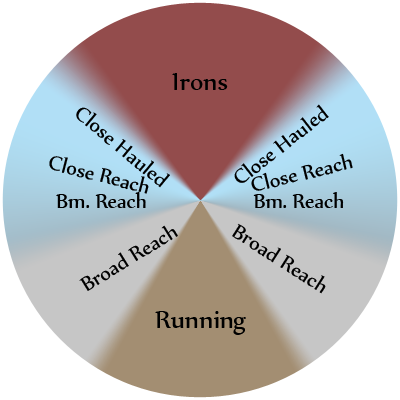
<style>
.page{position:relative;width:400px;height:400px;background:#ffffff}
.page>*{position:absolute;margin:0}
.t1{font:30px "Nyala-Regular";color:#000000}
.t2{font:24px "Nyala-Regular";color:#000000}
</style>
<div class="page">
<p class="t1" style="left:172px;top:73px;width:56px;height:17px">Irons</p>
<p class="t2" style="left:76px;top:107px;width:94px;height:81px;rotate:40deg">Close Hauled</p>
<p class="t2" style="left:234px;top:104px;width:95px;height:79px;rotate:-38deg">Close Hauled</p>
<p class="t2" style="left:49px;top:156px;width:100px;height:38px;rotate:15deg">Close Reach</p>
<p class="t2" style="left:251px;top:153px;width:102px;height:38px;rotate:-14deg">Close Reach</p>
<p class="t2" style="left:56px;top:192px;width:90px;height:16px">Bm. Reach</p>
<p class="t2" style="left:253px;top:192px;width:91px;height:16px">Bm. Reach</p>
<p class="t2" style="left:79px;top:225px;width:99px;height:66px;rotate:-32deg">Broad Reach</p>
<p class="t2" style="left:232px;top:223px;width:94px;height:71px;rotate:32deg">Broad Reach</p>
<p class="t1" style="left:155px;top:311px;width:91px;height:24px">Running</p>
</div>
